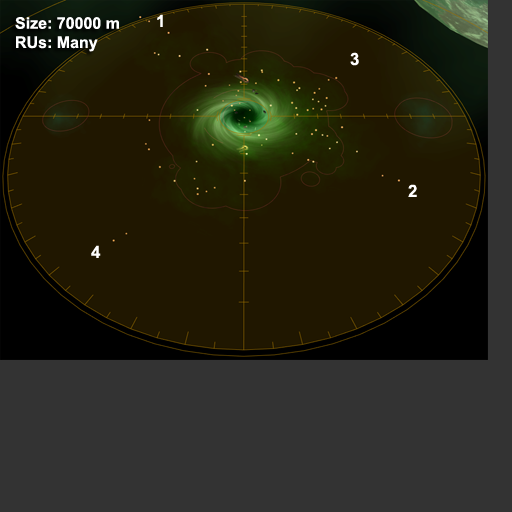
<style>
.page{position:relative;width:512px;height:512px;background:#333333}
.page>*{position:absolute;margin:0}
.t1{font:16px "Arial-BoldMT";color:#ffffff}
.t2{font:17px "Arial-BoldMT";color:#ffffff}
</style>
<div class="page">
<p class="t1" style="left:15px;top:17px;width:104px;height:35px">Size: 70000 m<br>RUs: Many</p>
<p class="t2" style="left:157px;top:14px;width:6px;height:13px">1</p>
<p class="t2" style="left:350px;top:52px;width:9px;height:14px">3</p>
<p class="t2" style="left:408px;top:184px;width:9px;height:13px">2</p>
<p class="t2" style="left:91px;top:245px;width:10px;height:13px">4</p>
</div>
